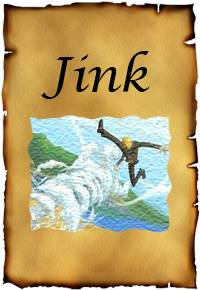
<style>
.page{position:relative;width:200px;height:290px}
.page>*{position:absolute;margin:0}
.t1{font:48px "LucidaCalligraphy-Italic";color:#000000;scale:0.97 1}
</style>
<div class="page">
<p class="t1" style="left:41px;top:51px;width:109px;height:48px">Jink</p>
</div>
